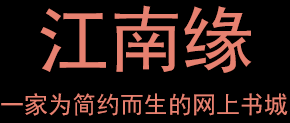
<style>
.page{position:relative;width:290px;height:123px;background:#000000}
.page>*{position:absolute;margin:0}
.t1{font:72px "SimHei";color:#e78170}
.t2{font:24px "SimHei";color:#e78170}
</style>
<div class="page">
<p class="t1" style="left:40px;top:5px;width:212px;height:68px">江南缘</p>
<p class="t2" style="left:1px;top:93px;width:287px;height:23px">一家为简约而生的网上书城</p>
</div>
